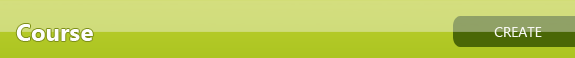
<style>
.page{position:relative;width:575px;height:58px}
.page>*{position:absolute;margin:0}
.t1{font:24px "SegoeUI-Bold";color:#fefefe}
.t2{font:14px "SegoeUI";color:#f6f7f1}
</style>
<div class="page">
<p class="t1" style="left:16px;top:24px;width:77px;height:17px">Course</p>
<p class="t2" style="left:494px;top:27px;width:48px;height:10px">CREATE</p>
</div>
